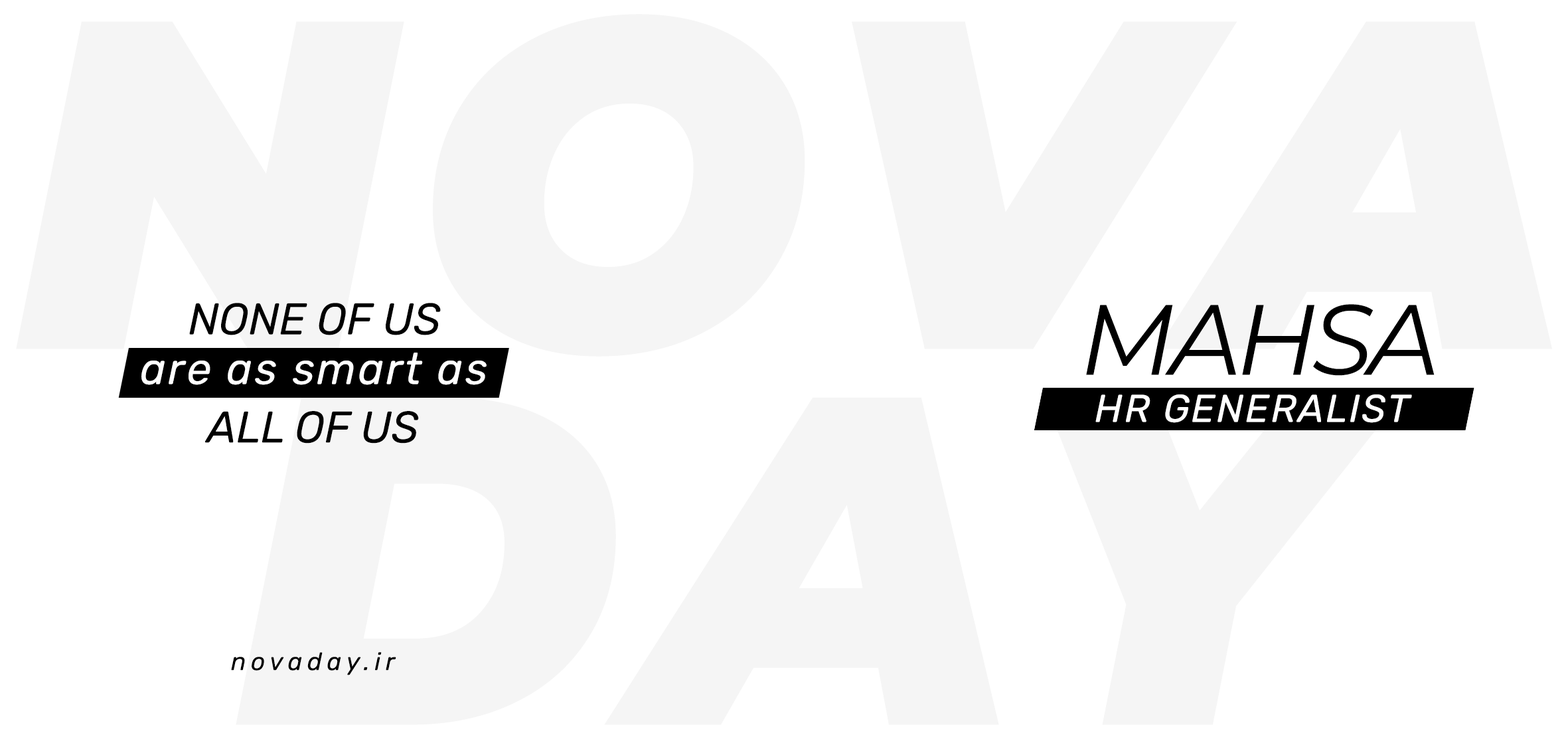
<style>
.page{position:relative;width:1568px;height:745px;background:#ffffff}
.page>*{position:absolute;margin:0}
.t1{font:44.3px "Rubik-Italic";color:#000000}
.t2{font:99.6px "Montserrat-Italic";letter-spacing:-0.05em;color:#000000}
.t3{font:44.3px "Rubik-Italic";letter-spacing:0.05em;color:#ffffff}
.t4{font:38.7px "Rubik-Italic";letter-spacing:0.05em;color:#ffffff}
.t5{font:24.9px "Rubik-Italic";letter-spacing:0.2em;color:#000000}
</style>
<div class="page">
<p class="t1" style="left:189px;top:303px;width:252px;height:32px">NONE OF US</p>
<p class="t2" style="left:1086px;top:304px;width:349px;height:72px">MAHSA</p>
<p class="t3" style="left:141px;top:353px;width:346px;height:32px">are as smart as</p>
<p class="t4" style="left:1095px;top:394px;width:317px;height:29px">HR GENERALIST</p>
<p class="t1" style="left:205px;top:411px;width:214px;height:32px">ALL OF US</p>
<p class="t5" style="left:231px;top:652px;width:165px;height:23px">novaday.ir</p>
</div>
